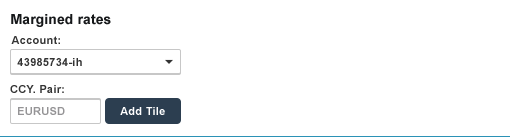
<style>
.page{position:relative;width:510px;height:137px;background:#ffffff}
.page>*{position:absolute;margin:0}
.t1{font:14px "Arial-BoldMT";letter-spacing:0.007em;color:#16181a}
.t2{font:11.1px "Arial-BoldMT";letter-spacing:0.025em;color:#333333}
.t3{font:11px "Arial-BoldMT";letter-spacing:0.025em;color:#333333}
.t4{font:11px "Arial-BoldMT";letter-spacing:0.025em;color:#959496}
.t5{font:11px "Arial-BoldMT";letter-spacing:0.025em;color:#ffffff}
</style>
<div class="page">
<p class="t1" style="left:11px;top:14px;width:100px;height:13px">Margined rates</p>
<p class="t2" style="left:11px;top:36px;width:49px;height:8px">Account:</p>
<p class="t2" style="left:17px;top:58px;width:65px;height:8px">43985734-ih</p>
<p class="t3" style="left:10px;top:85px;width:54px;height:8px">CCY. Pair:</p>
<p class="t4" style="left:18px;top:107px;width:47px;height:8px">EURUSD</p>
<p class="t5" style="left:120px;top:107px;width:45px;height:8px">Add Tile</p>
</div>
